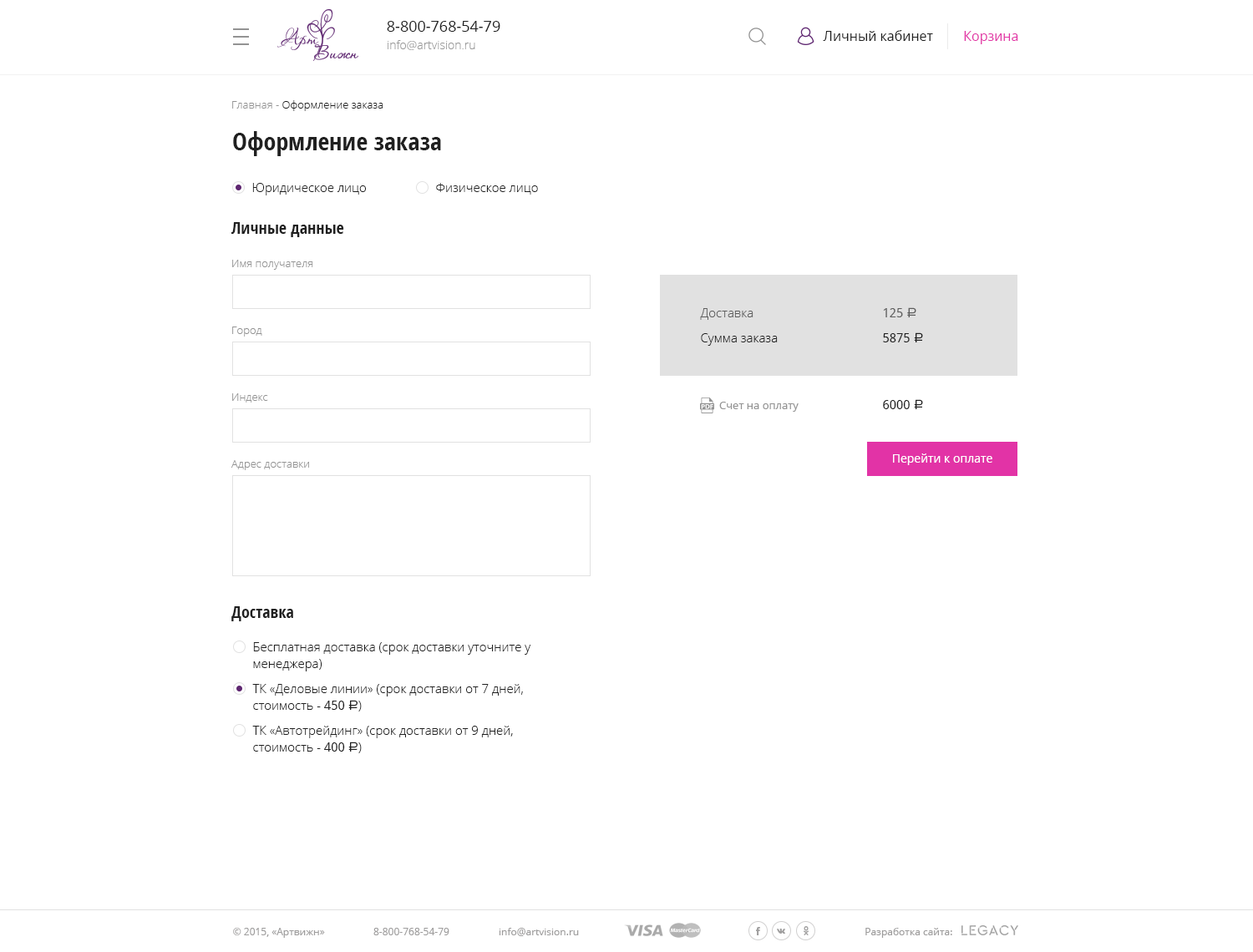
<style>
.page{position:relative;width:1253px;height:952px;background:#ffffff}
.page>*{position:absolute;margin:0}
.t1{font:15px "OpenSans";color:#202020}
.t2{font:11.7px "OpenSans-Light";color:#999999}
.t3{font:13.4px "OpenSans";color:#202020}
.t4{font:13.4px "OpenSans";color:#e233a6}
.t5{font:10.9px "OpenSans-Light";color:#202020}
.t6{font:10.9px "OpenSans-Light";color:#939393}
.t7{font:25.1px "OpenSans-CondensedBold";color:#202020}
.t8{font:12.5px "OpenSans-Light";color:#202020}
.t9{font:16.7px "OpenSans-CondensedBold";color:#202020}
.t10{font:12.5px "OpenSans-Light";color:#5d5d5d}
.t11{font:12.5px "DroidSans";color:#5d5d5d}
.t12{font:13.4px "ALSRubl";color:#5d5d5d}
.t13{font:12.5px "DroidSans";color:#202020}
.t14{font:13.4px "ALSRubl";color:#202020}
.t15{font:10.9px "OpenSans";color:#939393}
.t16{font:11.7px "OpenSans";color:#ffffff}
.t17{font:12.5px/16.7px "OpenSans-Light";color:#202020}
.t18{font:12.5px/15px "DroidSans";color:#202020}
.t19{font:13.4px/15px "ALSRubl";color:#202020}
.t20{font:10px "OpenSans";color:#9e9d9d}
</style>
<div class="page">
<p class="t1" style="left:387px;top:21px;width:113px;height:11px">8-800-768-54-79</p>
<p class="t2" style="left:387px;top:40px;width:88px;height:10px">info@artvision.ru</p>
<p class="t3" style="left:823px;top:30px;width:110px;height:11px">Личный кабинет</p>
<p class="t4" style="left:964px;top:31px;width:54px;height:13px">Корзина</p>
<p class="t5" style="left:232px;top:100px;width:151px;height:11px"><span class="t6">Главная - </span>Оформление заказа</p>
<p class="t7" style="left:233px;top:131px;width:208px;height:25px">Оформление заказа</p>
<p class="t8" style="left:252px;top:183px;width:114px;height:12px">Юридическое лицо</p>
<p class="t8" style="left:436px;top:183px;width:102px;height:12px">Физическое лицо</p>
<p class="t9" style="left:231px;top:222px;width:113px;height:15px">Личные данные</p>
<p class="t6" style="left:232px;top:260px;width:81px;height:10px">Имя получателя</p>
<p class="t10" style="left:700px;top:308px;width:53px;height:12px">Доставка</p>
<p class="t11" style="left:883px;top:307px;width:33px;height:10px">125 <span class="t12">a</span></p>
<p class="t6" style="left:232px;top:327px;width:30px;height:10px">Город</p>
<p class="t8" style="left:701px;top:333px;width:76px;height:13px">Сумма заказа</p>
<p class="t13" style="left:883px;top:332px;width:40px;height:10px">5875 <span class="t14">a</span></p>
<p class="t6" style="left:232px;top:393px;width:36px;height:10px">Индекс</p>
<p class="t15" style="left:719px;top:402px;width:79px;height:10px">Счет на оплату</p>
<p class="t13" style="left:883px;top:399px;width:40px;height:10px">6000 <span class="t14">a</span></p>
<p class="t6" style="left:231px;top:460px;width:78px;height:10px">Адрес доставки</p>
<p class="t16" style="left:893px;top:453px;width:99px;height:12px">Перейти к оплате</p>
<p class="t9" style="left:231px;top:606px;width:62px;height:15px">Доставка</p>
<p class="t17" style="left:253px;top:642px;width:278px;height:29px">Бесплатная доставка (срок доставки уточните у <br>менеджера)</p>
<p class="t17" style="left:252px;top:684px;width:271px;height:27px">ТК «Деловые линии» (срок доставки от 7 дней, <br>стоимость - <span class="t18">450 </span><span class="t19">a</span>)</p>
<p class="t17" style="left:252px;top:726px;width:261px;height:27px">ТК «Автотрейдинг» (срок доставки от 9 дней, <br>стоимость - <span class="t18">400 </span><span class="t19">a</span>)</p>
<p class="t20" style="left:233px;top:928px;width:92px;height:10px">© 2015, «Артвижн»</p>
<p class="t20" style="left:373px;top:928px;width:76px;height:7px">8-800-768-54-79</p>
<p class="t20" style="left:499px;top:928px;width:80px;height:8px">info@artvision.ru</p>
<p class="t20" style="left:865px;top:928px;width:87px;height:10px">Разработка сайта:</p>
</div>
